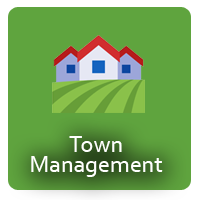
<style>
.page{position:relative;width:200px;height:200px;background:#5fa43e}
.page>*{position:absolute;margin:0}
.t1{font:24px/20px "Corbel";color:#ffffff}
</style>
<div class="page">
<p class="t1" style="left:31px;top:136px;width:132px;height:41px;text-align:center">Town<br>Management</p>
</div>
